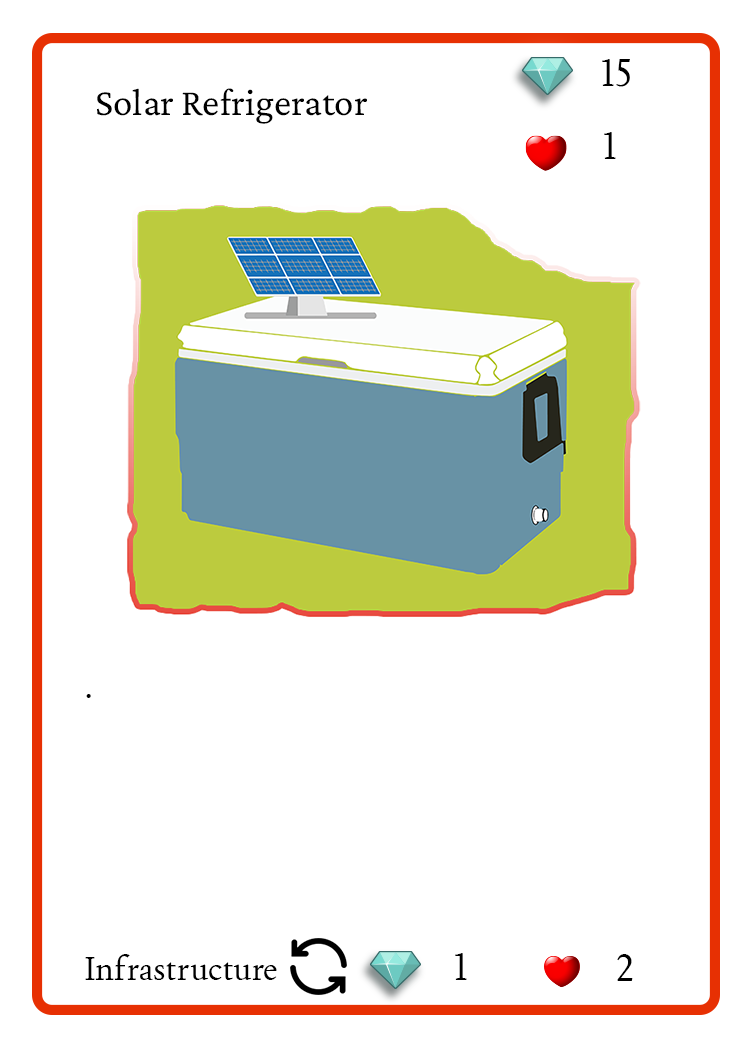
<style>
.page{position:relative;width:750px;height:1050px;background:#ffffff}
.page>*{position:absolute;margin:0}
.t1{font:37.5px "Joan-Regular";color:#000000;text-transform:uppercase}
.t2{font:38.9px "CrimsonPro-Regular";color:#000000}
.t3{font:33.3px "Joan-Regular";color:#000000}
</style>
<div class="page">
<p class="t1" style="left:602px;top:59px;width:28px;height:28px">15</p>
<p class="t2" style="left:97px;top:88px;width:270px;height:36px">Solar Refrigerator</p>
<p class="t1" style="left:604px;top:132px;width:12px;height:27px">1</p>
<p class="t3" style="left:86px;top:694px;width:5px;height:4px">.</p>
<p class="t1" style="left:455px;top:953px;width:12px;height:27px">1</p>
<p class="t3" style="left:85px;top:954px;width:192px;height:26px">Infrastructure</p>
<p class="t1" style="left:617px;top:954px;width:16px;height:27px">2</p>
</div>
